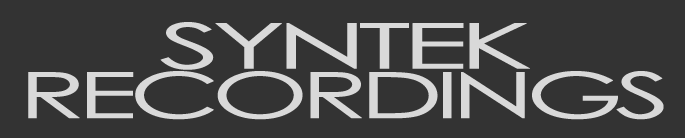
<style>
.page{position:relative;width:685px;height:138px;background:#333333}
.page>*{position:absolute;margin:0}
.t1{font:63px "CenturyGothic";letter-spacing:-0.1em;color:#d9d9d9;text-transform:uppercase;font-weight:bold;scale:1.96 1}
.t2{font:63.9px "CenturyGothic";letter-spacing:-0.1em;color:#d9d9d9;text-transform:uppercase;font-weight:bold;scale:1.74 1}
</style>
<div class="page">
<p class="t1" style="left:160px;top:22px;width:370px;height:48px">syntek</p>
<p class="t2" style="left:28px;top:71px;width:636px;height:49px">recordings</p>
</div>
